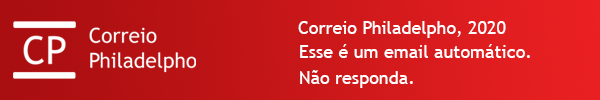
<style>
.page{position:relative;width:600px;height:100px}
.page>*{position:absolute;margin:0}
.t1{font:18px "TrebuchetMS";color:#ffffff}
</style>
<div class="page">
<p class="t1" style="left:298px;top:21px;width:208px;height:17px">Correio Philadelpho, 2020</p>
<p class="t1" style="left:300px;top:44px;width:230px;height:14px">Esse é um email automático.</p>
<p class="t1" style="left:300px;top:70px;width:113px;height:18px">Não responda.</p>
</div>
